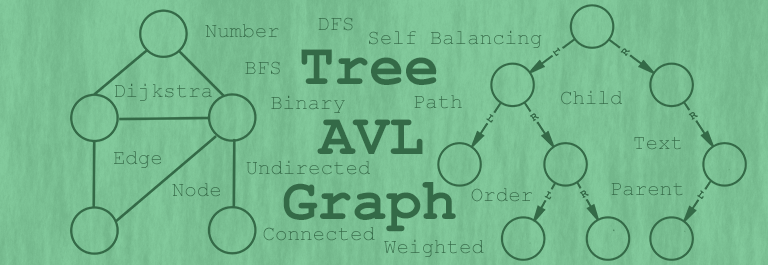
<style>
.page{position:relative;width:768px;height:265px}
.page>*{position:absolute;margin:0}
.t1{font:20.8px "CourierNewPSMT";color:#346a47}
.t2{font:58.3px "CourierNewPS-BoldMT";color:#346a47}
</style>
<div class="page">
<p class="t1" style="left:318px;top:17px;width:35px;height:14px">DFS</p>
<p class="t1" style="left:205px;top:24px;width:74px;height:14px">Number</p>
<p class="t1" style="left:369px;top:30px;width:173px;height:18px">Self Balancing</p>
<p class="t2" style="left:301px;top:49px;width:136px;height:36px">Tree</p>
<p class="t1" style="left:245px;top:61px;width:35px;height:14px">BFS</p>
<p class="t1" style="left:115px;top:83px;width:97px;height:18px">Dijkstra</p>
<p class="t1" style="left:271px;top:95px;width:74px;height:18px">Binary</p>
<p class="t1" style="left:414px;top:95px;width:48px;height:14px">Path</p>
<p class="t1" style="left:561px;top:90px;width:61px;height:15px">Child</p>
<p class="t2" style="left:317px;top:119px;width:106px;height:35px">AVL</p>
<p class="t1" style="left:634px;top:137px;width:47px;height:13px">Text</p>
<p class="t1" style="left:114px;top:151px;width:47px;height:17px">Edge</p>
<p class="t1" style="left:246px;top:160px;width:124px;height:15px">Undirected</p>
<p class="t1" style="left:172px;top:183px;width:48px;height:14px">Node</p>
<p class="t2" style="left:283px;top:182px;width:173px;height:50px">Graph</p>
<p class="t1" style="left:611px;top:183px;width:72px;height:13px">Parent</p>
<p class="t1" style="left:471px;top:188px;width:61px;height:14px">Order</p>
<p class="t1" style="left:263px;top:227px;width:112px;height:14px">Connected</p>
<p class="t1" style="left:384px;top:239px;width:100px;height:18px">Weighted</p>
</div>
